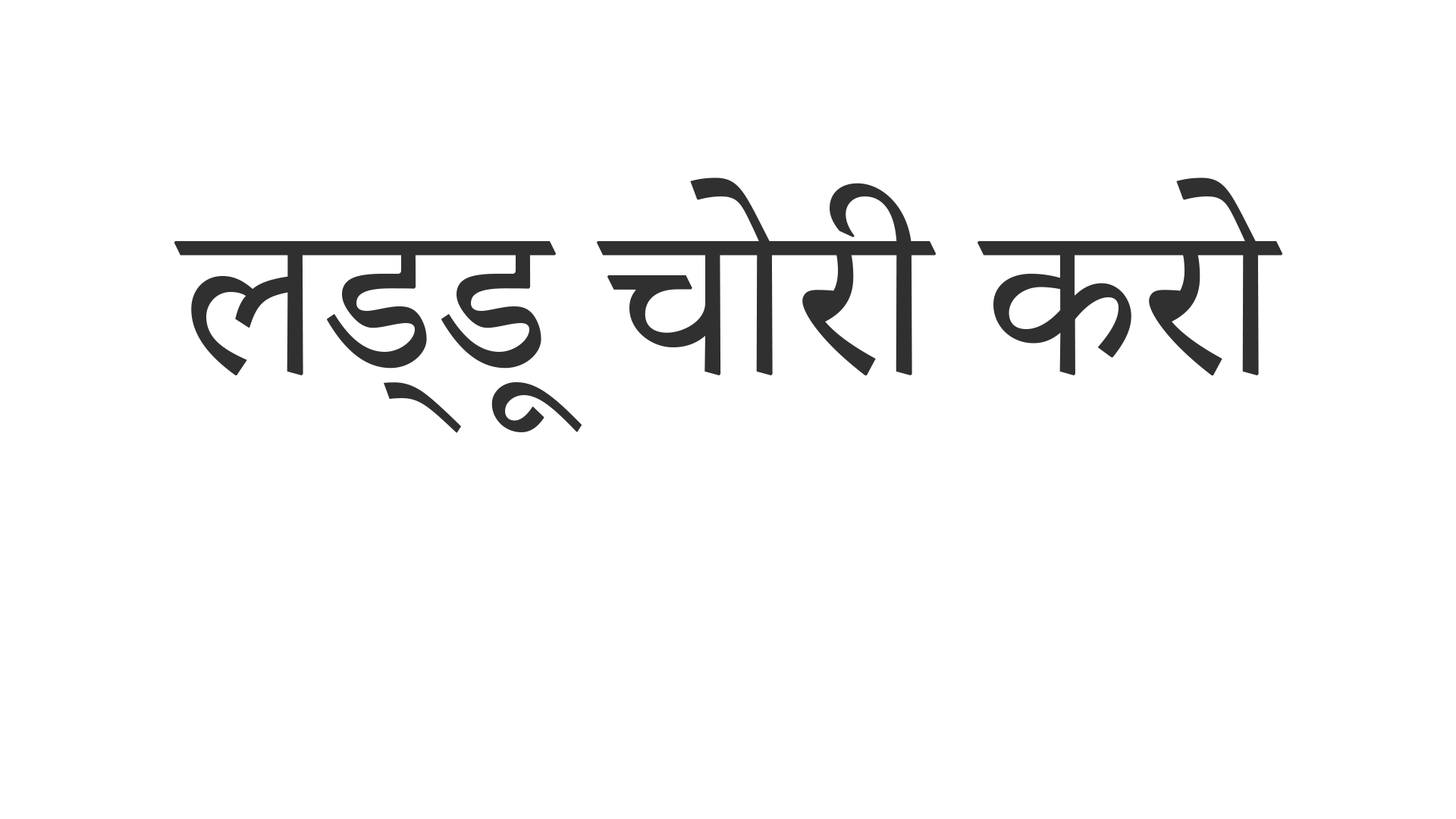
<style>
.page{position:relative;width:1456px;height:819px;background:#ffffff}
.page>*{position:absolute;margin:0}
.t1{font:265.4px "AdobeDevanagari-Regular";color:#303030}
</style>
<div class="page">
<p class="t1" style="left:174px;top:177px;width:1109px;height:256px">लड्डू चोरी करो</p>
</div>
